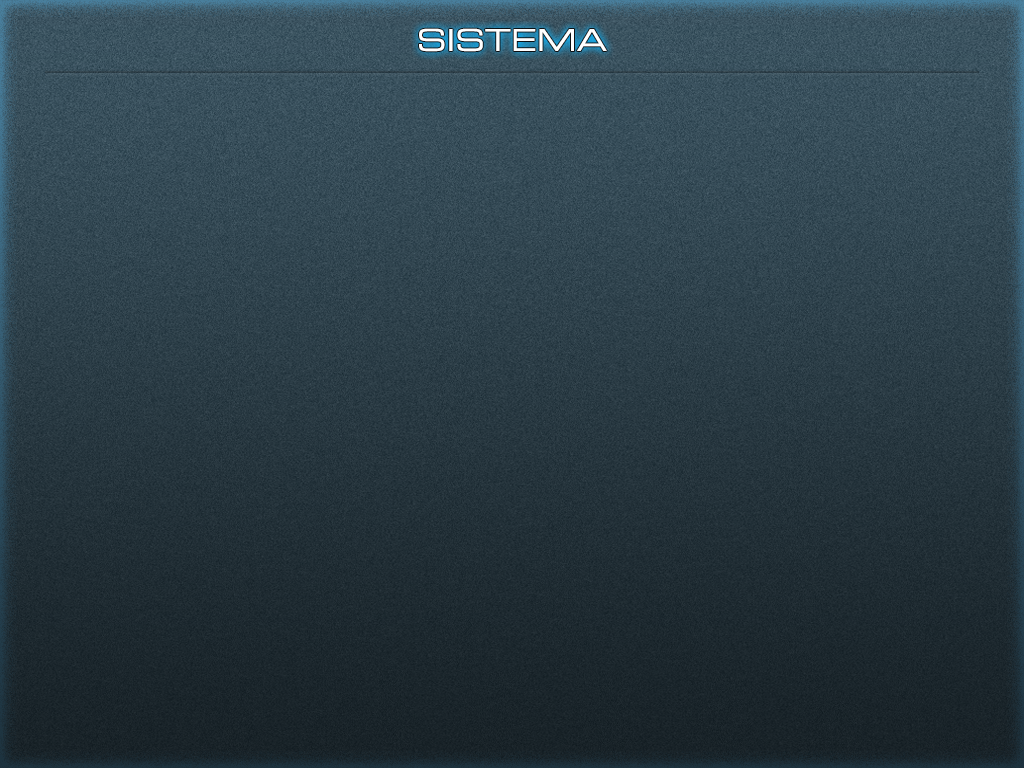
<style>
.page{position:relative;width:1024px;height:768px}
.page>*{position:absolute;margin:0}
.t1{font:30px "Eurostile-ExtendedTwo";color:#ffffff}
</style>
<div class="page">
<p class="t1" style="left:419px;top:28px;width:188px;height:24px">SISTEMA</p>
</div>
